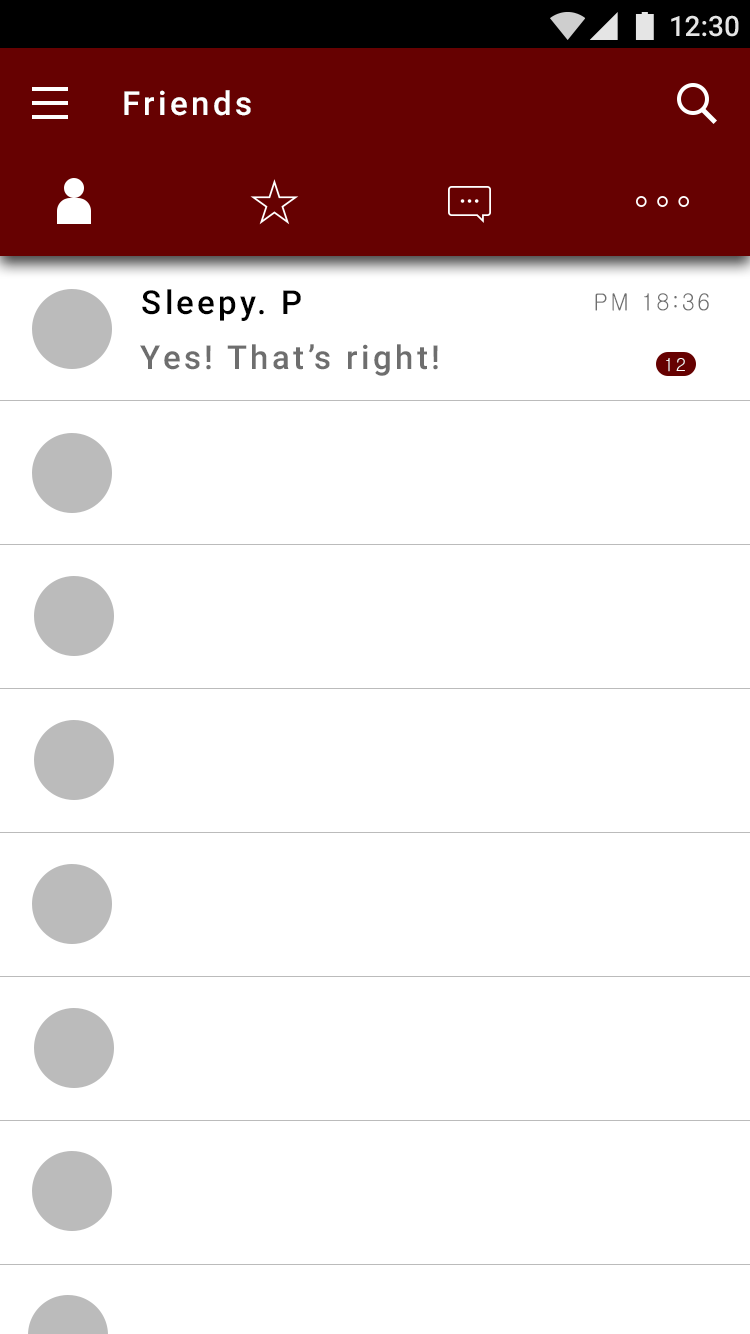
<style>
.page{position:relative;width:750px;height:1334px;background:#ffffff}
.page>*{position:absolute;margin:0}
.t1{font:33px "Roboto-Medium";letter-spacing:0.1em;color:#ffffff}
.t2{font:33px "Roboto-Medium";letter-spacing:0.1em;color:#000000}
.t3{font:22.9px "Gulim";letter-spacing:0.1em;color:#6e6e6e}
.t4{font:33px "Roboto-Medium";letter-spacing:0.1em;color:#6e6e6e}
.t5{font:17.8px "Gulim";letter-spacing:0.1em;color:#ffffff}
</style>
<div class="page">
<p class="t1" style="left:124px;top:90px;width:127px;height:26px">Friends</p>
<p class="t2" style="left:142px;top:289px;width:159px;height:32px">Sleepy. P</p>
<p class="t3" style="left:595px;top:293px;width:114px;height:18px">PM 18:36</p>
<p class="t4" style="left:140px;top:344px;width:298px;height:32px">Yes! That’s right!</p>
<p class="t5" style="left:666px;top:358px;width:19px;height:14px">12</p>
</div>
